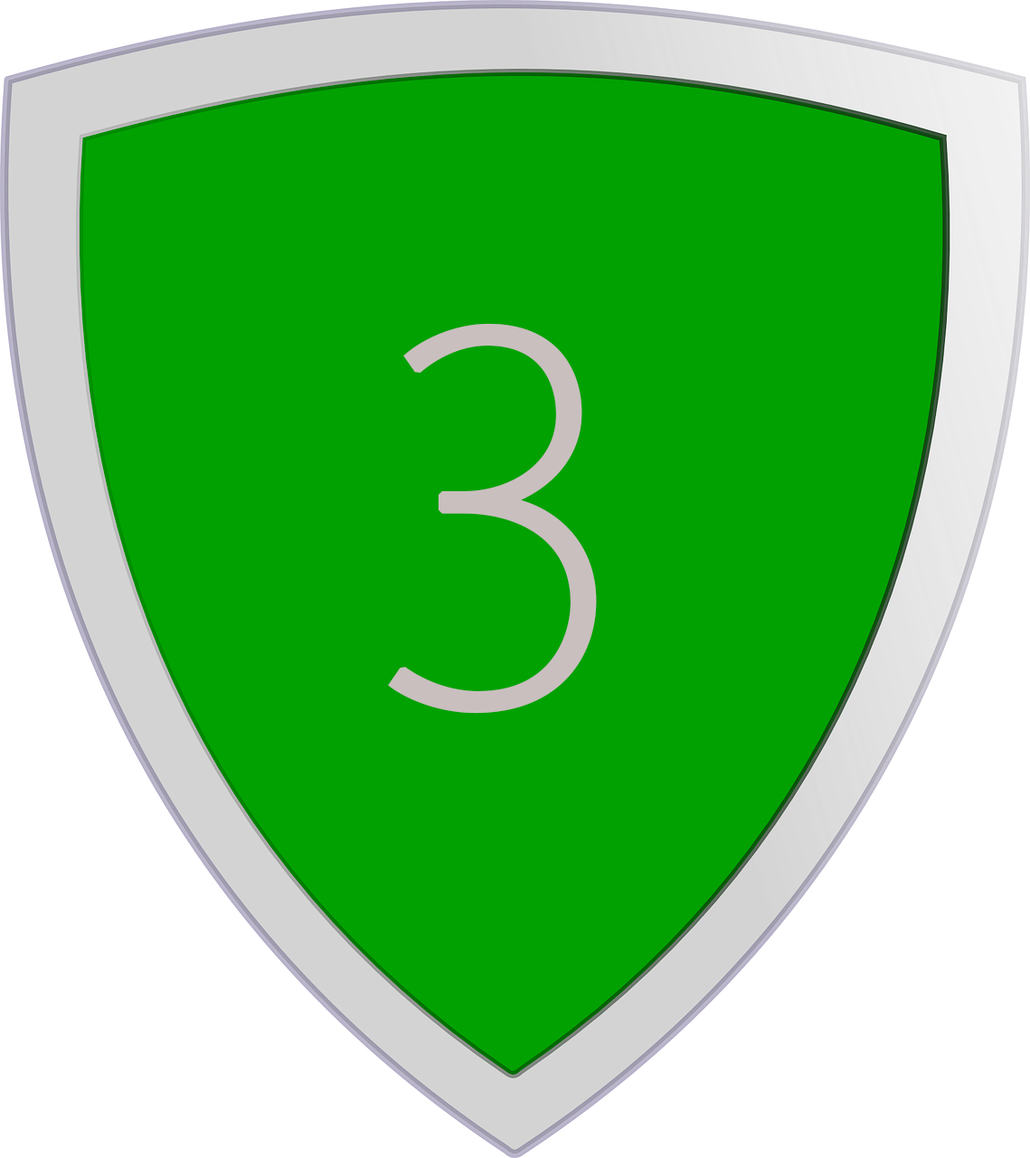
<style>
.page{position:relative;width:1030px;height:1158px;background:#00a100}
.page>*{position:absolute;margin:0}
.t1{font:496.1px "KozGoPr6N-ExtraLight";letter-spacing:-0.01em;color:#c9bfbf;font-weight:bold}
</style>
<div class="page">
<p class="t1" style="left:388px;top:323px;width:209px;height:391px">3</p>
</div>
